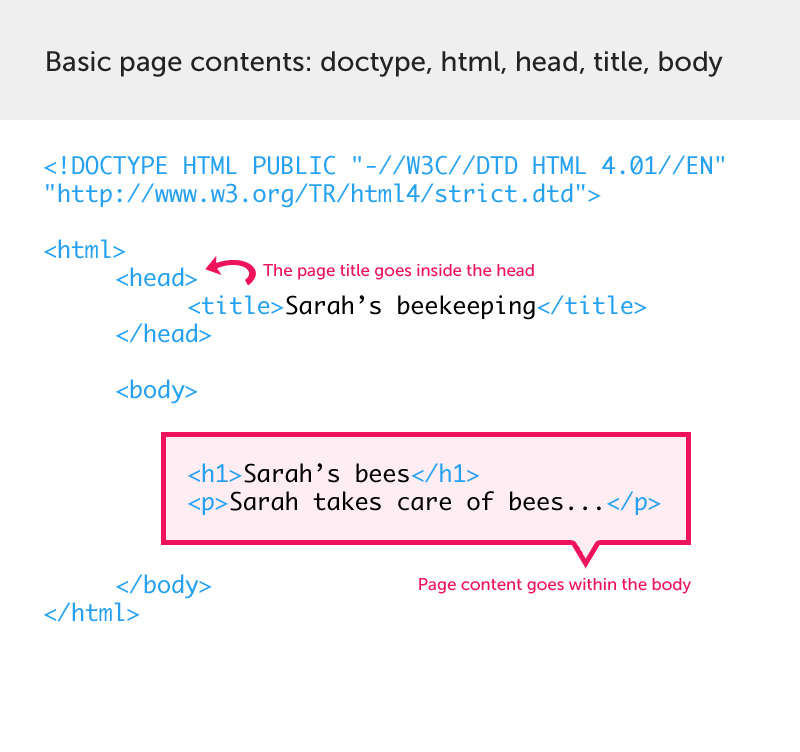
<style>
.page{position:relative;width:800px;height:752px;background:#ffffff}
.page>*{position:absolute;margin:0}
.t1{font:28px "MuseoSans-500";color:#333333}
.t2{font:23.3px "Monaco";color:#26a1f0}
.t3{font:23.3px "Monaco";color:#000000}
.t4{font:16.9px "MuseoSans-500";color:#ed145b}
</style>
<div class="page">
<p class="t1" style="left:47px;top:51px;width:676px;height:26px">Basic page contents: doctype, html, head, title, body</p>
<p class="t2" style="left:43px;top:155px;width:682px;height:467px">&lt;!DOCTYPE HTML PUBLIC "-//W3C//DTD HTML 4.01//EN" "http://www.w3.org/TR/html4/strict.dtd"&gt;<br><br>&lt;html&gt;<br> &lt;head&gt;<br>  &lt;title&gt;<span class="t3">Sarah’s beekeeping</span>&lt;/title&gt;<br> &lt;/head&gt;<br><br> &lt;body&gt;<br><br><br>  &lt;h1&gt;<span class="t3">Sarah’s bees</span>&lt;/h1&gt;<br>  &lt;p&gt;<span class="t3">Sarah takes care of bees...</span>&lt;/p&gt;<br><br><br> &lt;/body&gt;<br>&lt;/html&gt;</p>
<p class="t4" style="left:263px;top:264px;width:271px;height:16px">The page title goes inside the head</p>
<p class="t4" style="left:419px;top:578px;width:272px;height:16px">Page content goes within the body</p>
</div>
